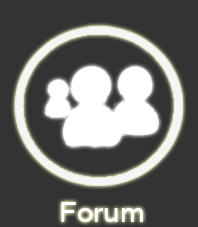
<style>
.page{position:relative;width:198px;height:227px;background:#333333}
.page>*{position:absolute;margin:0}
.t1{font:31.2px "Raavi";color:#ffffff;scale:1.05 1}
</style>
<div class="page">
<p class="t1" style="left:61px;top:202px;width:82px;height:20px">Forum</p>
</div>
